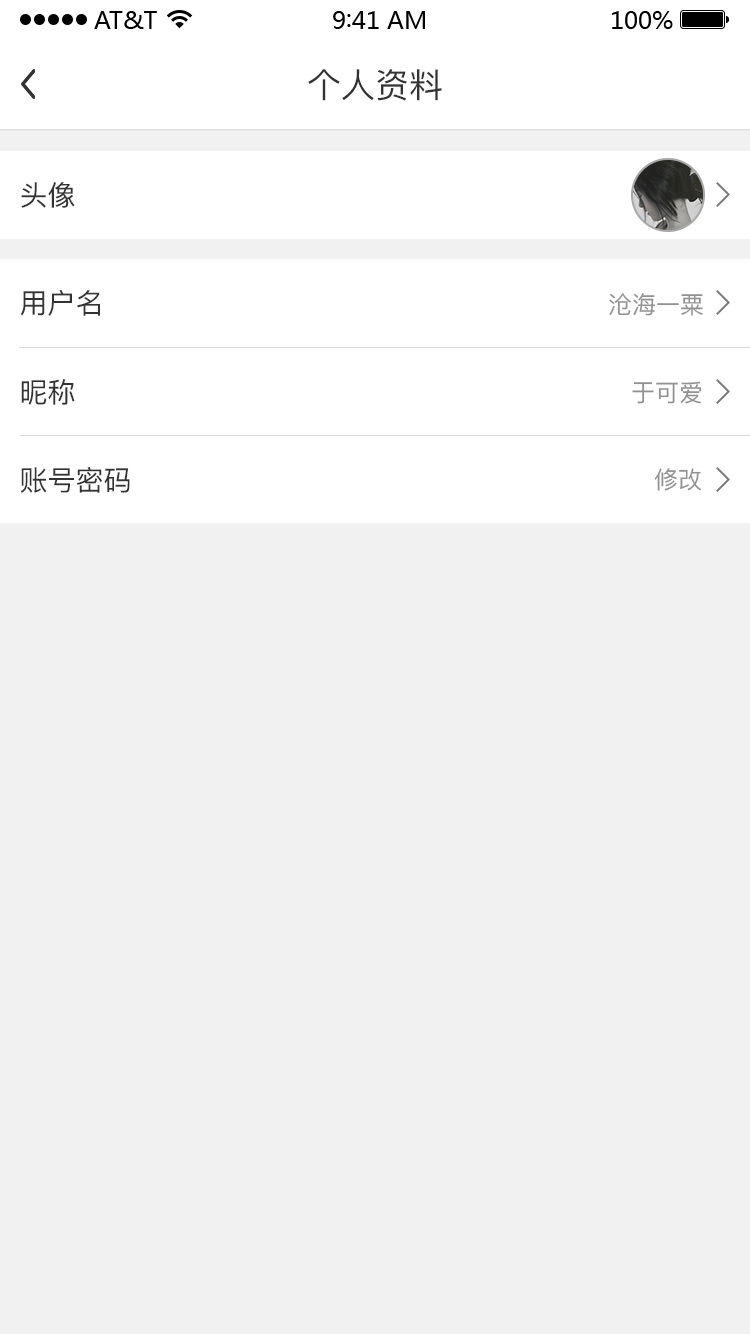
<style>
.page{position:relative;width:750px;height:1334px;background:#f1f1f1}
.page>*{position:absolute;margin:0}
.t1{font:34px "PingFang-SC-Medium";color:#333333}
.t2{font:28px "PingFang-SC-Medium";color:#333333}
.t3{font:24px "PingFang-SC-Medium";color:#929292}
</style>
<div class="page">
<p class="t1" style="left:308px;top:69px;width:134px;height:32px">个人资料</p>
<p class="t2" style="left:21px;top:182px;width:54px;height:26px">头像</p>
<p class="t2" style="left:20px;top:290px;width:80px;height:26px">用户名</p>
<p class="t3" style="left:609px;top:293px;width:94px;height:23px">沧海一粟</p>
<p class="t2" style="left:21px;top:379px;width:54px;height:26px">昵称</p>
<p class="t3" style="left:632px;top:381px;width:70px;height:23px">于可爱</p>
<p class="t2" style="left:20px;top:467px;width:110px;height:26px">账号密码</p>
<p class="t3" style="left:654px;top:468px;width:47px;height:23px">修改</p>
</div>
